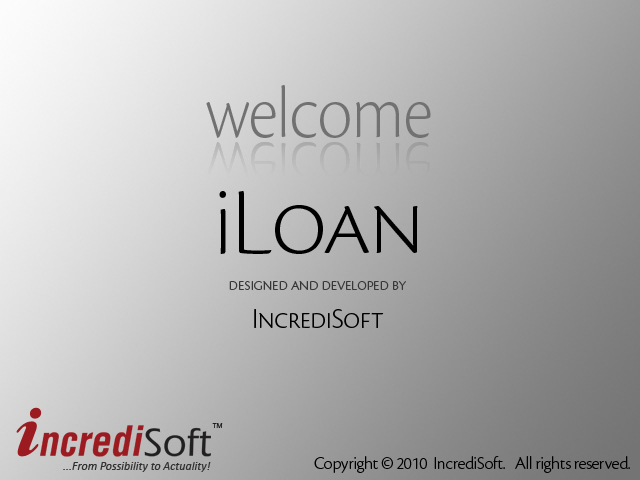
<style>
.page{position:relative;width:640px;height:480px}
.page>*{position:absolute;margin:0}
.t1{font:77.3px "CronosPro-LtDisp";color:#717171;scale:0.91 1}
.t2{font:99.7px "CronosPro-LtDisp";color:#000000;font-variant:small-caps}
.t3{font:99.7px "CronosPro-LtDisp";color:#000000}
.t4{font:18px "CronosPro-LtDisp";color:#373737;font-variant:small-caps}
.t5{font:30px "CronosPro-LtDisp";color:#000000;font-variant:small-caps}
.t6{font:40.6px "AGLettericaCondensed-BoldOblique";color:#9c1b21}
.t7{font:40.6px "ErasITC-Medium";color:#211f20}
.t8{font:6.8px "ErasITC-Medium";color:#211f20}
.t9{font:12px "Calibri-Italic";color:#313131}
.t10{font:18px "CronosPro-LtDisp";color:#000000}
</style>
<div class="page">
<p class="t1" style="left:206px;top:85px;width:225px;height:53px">welcome</p>
<p class="t2" style="left:219px;top:191px;width:199px;height:63px"><span class="t3">i</span>Loan</p>
<p class="t4" style="left:229px;top:281px;width:177px;height:9px">designed and developed by</p>
<p class="t5" style="left:254px;top:309px;width:130px;height:19px">IncrediSoft</p>
<p class="t6" style="left:40px;top:425px;width:171px;height:32px">ncredi<span class="t7">Soft</span></p>
<p class="t8" style="left:212px;top:423px;width:11px;height:5px">TM</p>
<p class="t9" style="left:63px;top:462px;width:148px;height:10px">...From Possibility to Actuality!</p>
<p class="t10" style="left:314px;top:456px;width:316px;height:17px">Copyright © 2010  IncrediSoft.   All rights reserved.</p>
</div>
